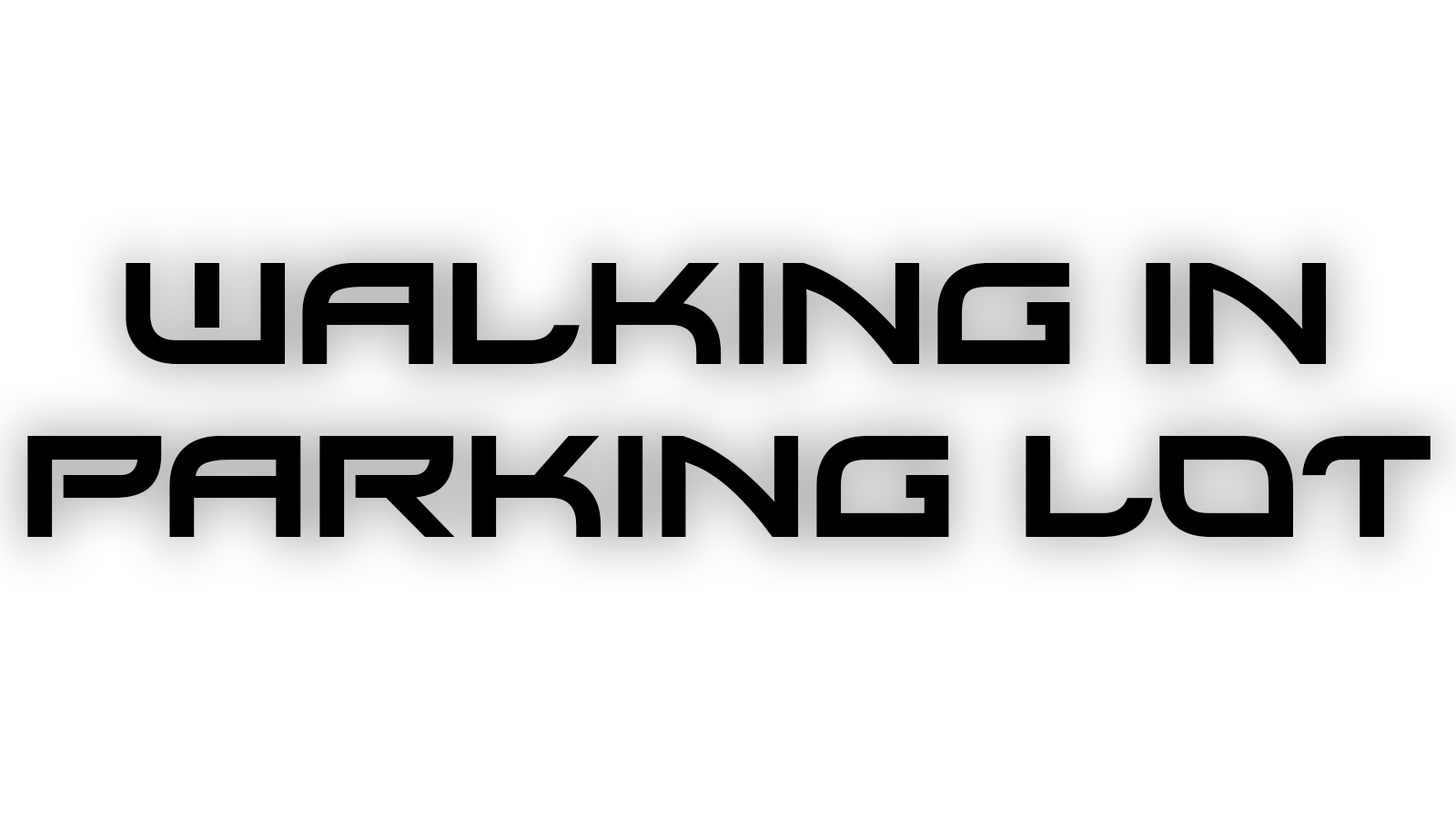
<style>
.page{position:relative;width:1456px;height:819px;background:#ffffff}
.page>*{position:absolute;margin:0}
.t1{font:144.1px "Xirod-Regular";color:#000000}
</style>
<div class="page">
<p class="t1" style="left:27px;top:263px;width:1404px;height:274px;text-align:center">Walking in<br>parking lot</p>
</div>
